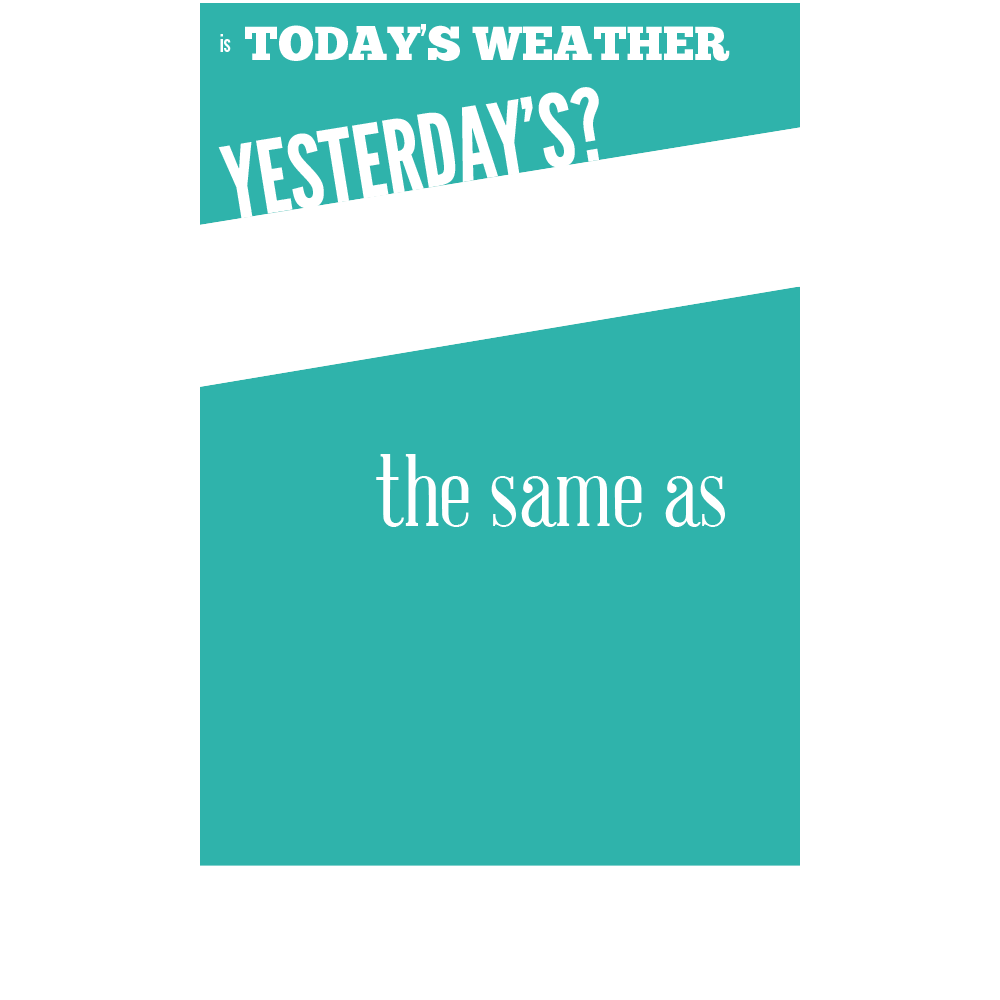
<style>
.page{position:relative;width:1000px;height:1000px;background:#ffffff}
.page>*{position:absolute;margin:0}
.t1{font:48px "ChunkFive";color:#ffffff}
.t2{font:48px "LeagueGothic";color:#ffffff}
.t3{font:24px "LeagueGothic";color:#ffffff}
.t4{font:100px "LeagueGothic";color:#ffffff}
.t5{font:100px "AbrahamLincoln";color:#ffffff}
</style>
<div class="page">
<p class="t1" style="left:245px;top:24px;width:485px;height:37px">TODAY<span class="t2">’</span>S WEATHER</p>
<p class="t3" style="left:220px;top:34px;width:11px;height:18px">is</p>
<p class="t4" style="left:218px;top:87px;width:381px;height:132px">YESTERDAY’S?</p>
<p class="t5" style="left:376px;top:454px;width:349px;height:73px">the same as</p>
</div>
